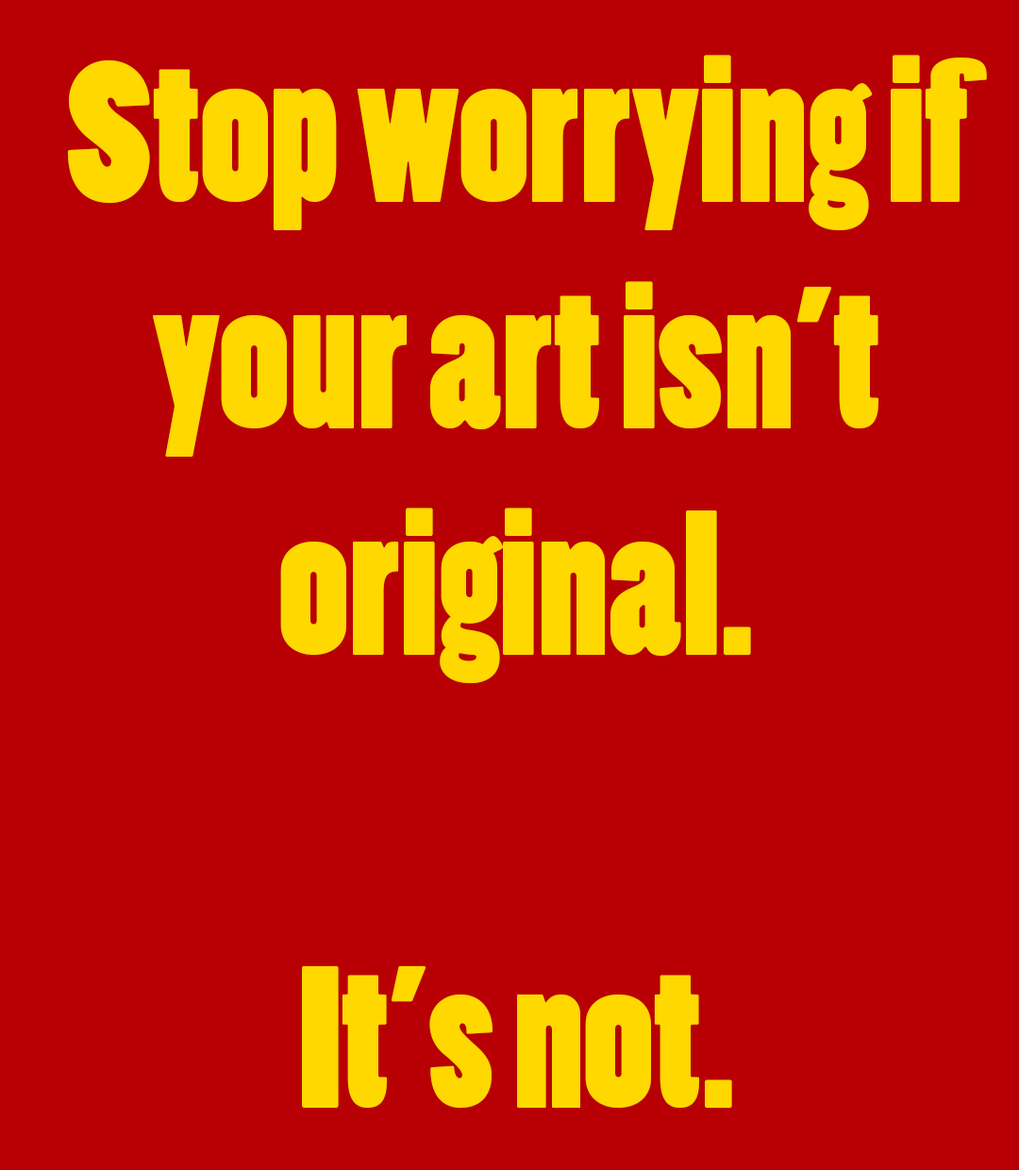
<style>
.page{position:relative;width:1019px;height:1170px;background:#b80004}
.page>*{position:absolute;margin:0}
.t1{font:188.7px "PoplarStd";color:#ffd800}
</style>
<div class="page">
<p class="t1" style="left:68px;top:55px;width:919px;height:1054px;text-align:center">Stop worrying if your art isn’t    original.<br><br>It’s not.</p>
</div>
